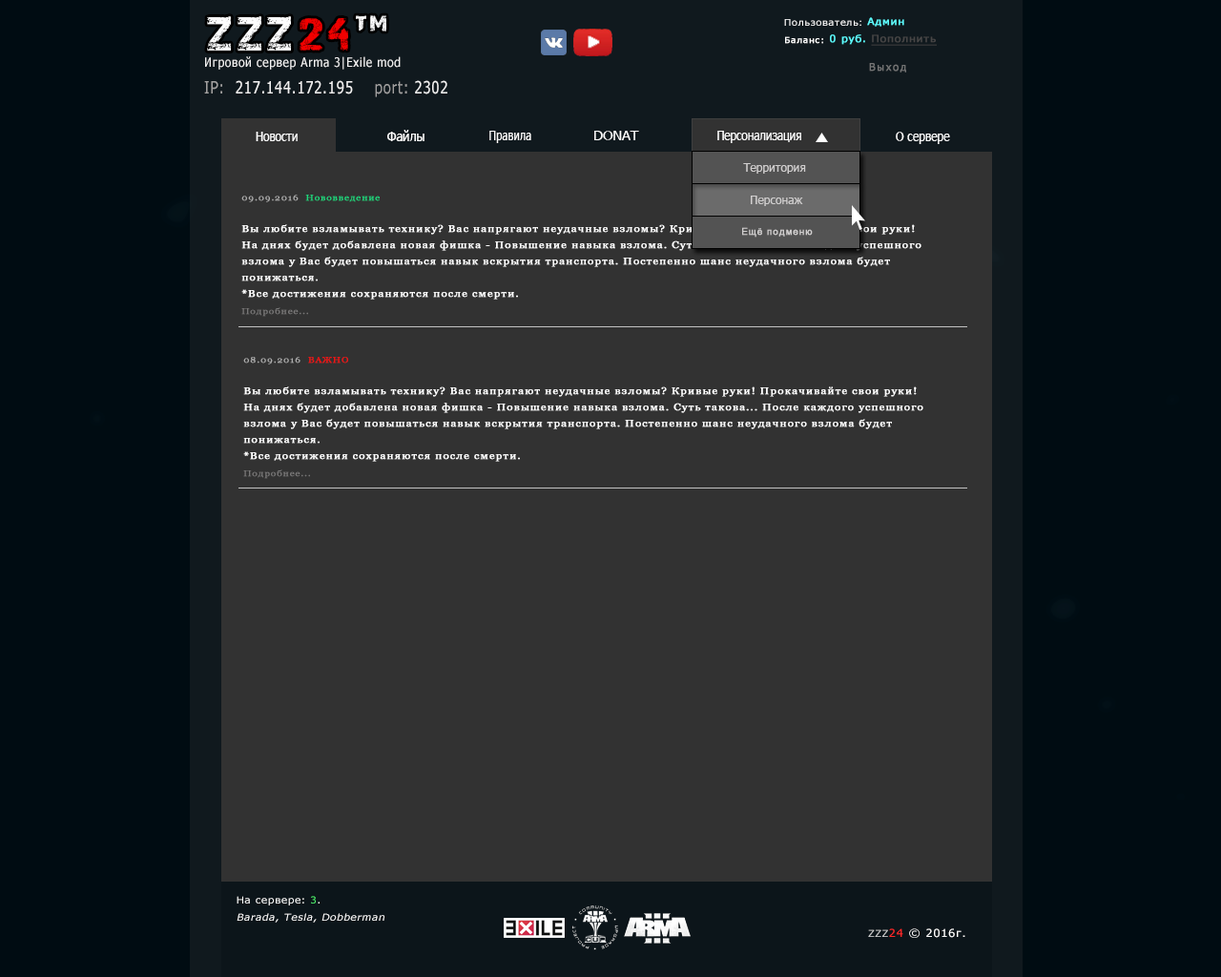
<style>
.page{position:relative;width:1221px;height:977px;background:#323232}
.page>*{position:absolute;margin:0}
.t1{font:44.5px "28DaysLater";letter-spacing:0.08em;color:#fcfcfd;scale:1.17 1}
.t2{font:44.5px "28DaysLater";letter-spacing:0.08em;color:#f20000;scale:1.17 1}
.t3{font:39.2px "28DaysLater";letter-spacing:0.08em;color:#fcfcfd;scale:1.27 1}
.t4{font:15.6px/13.4px "Tahoma";letter-spacing:0.08em;color:#ffffff;scale:1.12 1}
.t5{font:16.8px/13.4px "Tahoma";letter-spacing:0.08em;color:#5efdff;font-weight:bold;scale:1.12 1}
.t6{font:14.4px/13.4px "Tahoma";letter-spacing:0.08em;color:#ffffff;font-weight:bold;scale:1.12 1}
.t7{font:16.8px/13.4px "Tahoma";letter-spacing:0.08em;color:#474646;font-weight:bold;text-decoration:underline;scale:1.12 1}
.t8{font:10.5px/15.3px "Tahoma";letter-spacing:0.14em;color:#747575;font-weight:bold}
.t9{font:12.9px "Tahoma";letter-spacing:0.06em;color:#f1f1f1;scale:0.88 1}
.t10{font:16.8px "Tahoma";letter-spacing:0.06em;color:#f1f1f1;scale:0.84 1}
.t11{font:16.8px "Tahoma";letter-spacing:0.06em;color:#a2a1a1;scale:0.84 1}
.t12{font:13px "Tahoma";color:#ffffff;scale:0.86 1}
.t13{font:13px "Tahoma";color:#ffffff;scale:0.94 1}
.t14{font:13px "Tahoma";color:#fffefe;scale:0.84 1}
.t15{font:13px "Tahoma";color:#fffefe;scale:1.07 1}
.t16{font:13px "Tahoma";color:#ffffff;scale:0.89 1}
.t17{font:11.4px "Tahoma";color:#d0cece}
.t18{font:16.8px/16.2px "Georgia";letter-spacing:0.08em;color:#ffffff;font-weight:bold;scale:1.12 1}
.t19{font:14.4px/16.2px "Georgia";letter-spacing:0.08em;color:#acacac;font-weight:bold;scale:1.12 1}
.t20{font:14.4px/16.2px "Georgia";letter-spacing:0.08em;color:#1cd77d;font-weight:bold;scale:1.12 1}
.t21{font:14.4px/16.2px "Georgia";letter-spacing:0.08em;color:#787777;font-weight:bold;scale:1.12 1}
.t22{font:11.4px "Tahoma";color:#d1cfcf}
.t23{font:16.8px "ArialNarrow";letter-spacing:0.08em;color:#d1cfcf;font-weight:bold;scale:1.12 1}
.t24{font:14.4px/16.2px "Georgia";letter-spacing:0.08em;color:#f90f0f;font-weight:bold;scale:1.12 1}
.t25{font:9.5px/10.4px "Tahoma";letter-spacing:0.08em;color:#ffffff;font-style:italic;scale:1.14 1}
.t26{font:9.5px/17px "Tahoma";letter-spacing:0.08em;color:#ffffff;scale:1.14 1}
.t27{font:9.5px/17px "Tahoma";letter-spacing:0.08em;color:#51f870;scale:1.14 1}
.t28{font:10.8px "Tahoma";letter-spacing:0.08em;color:#ffffff;scale:1.12 1}
.t29{font:9.6px "Tahoma";letter-spacing:0.08em;color:#d4d5d6;scale:1.12 1}
.t30{font:10.8px "Tahoma";letter-spacing:0.08em;color:#fc2828;scale:1.12 1}
</style>
<div class="page">
<p class="t1" style="left:207px;top:15px;width:179px;height:36px">ZZZ<span class="t2">24</span><span class="t3">tm</span></p>
<p class="t4" style="left:784px;top:17px;width:153px;height:55px;text-align:center">Пользователь: <span class="t5">Админ<br>        </span><span class="t6">Баланс:</span><span class="t5"> 0 руб. </span><span class="t7">Пополнить<br><br>  </span><span class="t8">  Выход</span></p>
<p class="t9" style="left:205px;top:56px;width:196px;height:14px">Игровой сервер Arma 3|Exile mod</p>
<p class="t10" style="left:204px;top:80px;width:243px;height:17px"><span class="t11">IP:</span>  217.144.172.195    <span class="t11">port:</span> 2302</p>
<p class="t12" style="left:256px;top:132px;width:42px;height:9px">Новости</p>
<p class="t13" style="left:387px;top:130px;width:37px;height:11px">Файлы</p>
<p class="t14" style="left:489px;top:131px;width:42px;height:12px">Правила</p>
<p class="t15" style="left:594px;top:131px;width:45px;height:9px">DONAT</p>
<p class="t12" style="left:717px;top:131px;width:84px;height:12px">Персонализация</p>
<p class="t16" style="left:896px;top:132px;width:54px;height:12px">О сервере</p>
<p class="t17" style="left:743px;top:163px;width:63px;height:11px">Территория</p>
<p class="t18" style="left:241px;top:195px;width:680px;height:122px;text-align:right"><span class="t19">09.09.2016  </span><span class="t20">Нововведение<br><br></span>Вы любите взламывать технику? Вас напрягают неудачные взломы? Кривые руки! Прокачивайте свои руки!<br>На днях будет добавлена новая фишка - Повышение навыка взлома. Суть такова... После каждого успешного взлома у Вас будет повышаться навык вскрытия транспорта. Постепенно шанс неудачного взлома будет понижаться.<br>*Все достижения сохраняются после смерти.<br><span class="t21">Подробнее...</span></p>
<p class="t22" style="left:751px;top:196px;width:52px;height:10px">Персонаж</p>
<p class="t23" style="left:742px;top:227px;width:71px;height:10px">Ещё подменю</p>
<p class="t18" style="left:243px;top:357px;width:680px;height:122px;text-align:right"><span class="t19">08.09.2016  </span><span class="t24">ВАЖНО<br><br></span>Вы любите взламывать технику? Вас напрягают неудачные взломы? Кривые руки! Прокачивайте свои руки!<br>На днях будет добавлена новая фишка - Повышение навыка взлома. Суть такова... После каждого успешного взлома у Вас будет повышаться навык вскрытия транспорта. Постепенно шанс неудачного взлома будет понижаться.<br>*Все достижения сохраняются после смерти.<br><span class="t21">Подробнее...</span></p>
<p class="t25" style="left:237px;top:896px;width:147px;height:26px;text-align:right"><span class="t26">На сервере: </span><span class="t27">3</span><span class="t26">.<br></span>Barada, Tesla, Dobberman</p>
<p class="t28" style="left:868px;top:928px;width:97px;height:10px"><span class="t29">ZZZ</span><span class="t30">24 </span>© 2016г.</p>
</div>
